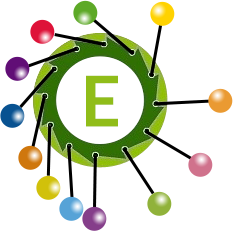
<style>
.page{position:relative;width:233px;height:231px;background:#ffffff}
.page>*{position:absolute;margin:0}
.t1{font:70px "Lato-Bold";color:#90bd19}
</style>
<div class="page">
<p class="t1" style="left:86px;top:75px;width:32px;height:52px">Е</p>
</div>
